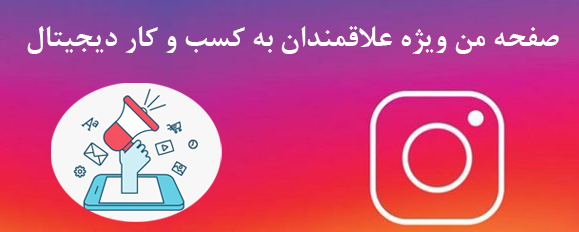
<style>
.page{position:relative;width:579px;height:232px}
.page>*{position:absolute;margin:0}
.t1{font:32px "BNazaninBold";color:#ffffff}
</style>
<div class="page">
<p class="t1" style="left:27px;top:26px;width:532px;height:28px">صفحه من ویژه علاقمندان به کسب و کار دیجیتال</p>
</div>
